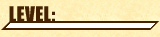
<style>
.page{position:relative;width:160px;height:37px}
.page>*{position:absolute;margin:0}
.t1{font:20px "Impact";color:#452202}
</style>
<div class="page">
<p class="t1" style="left:9px;top:6px;width:46px;height:16px">LEVEL:</p>
</div>
